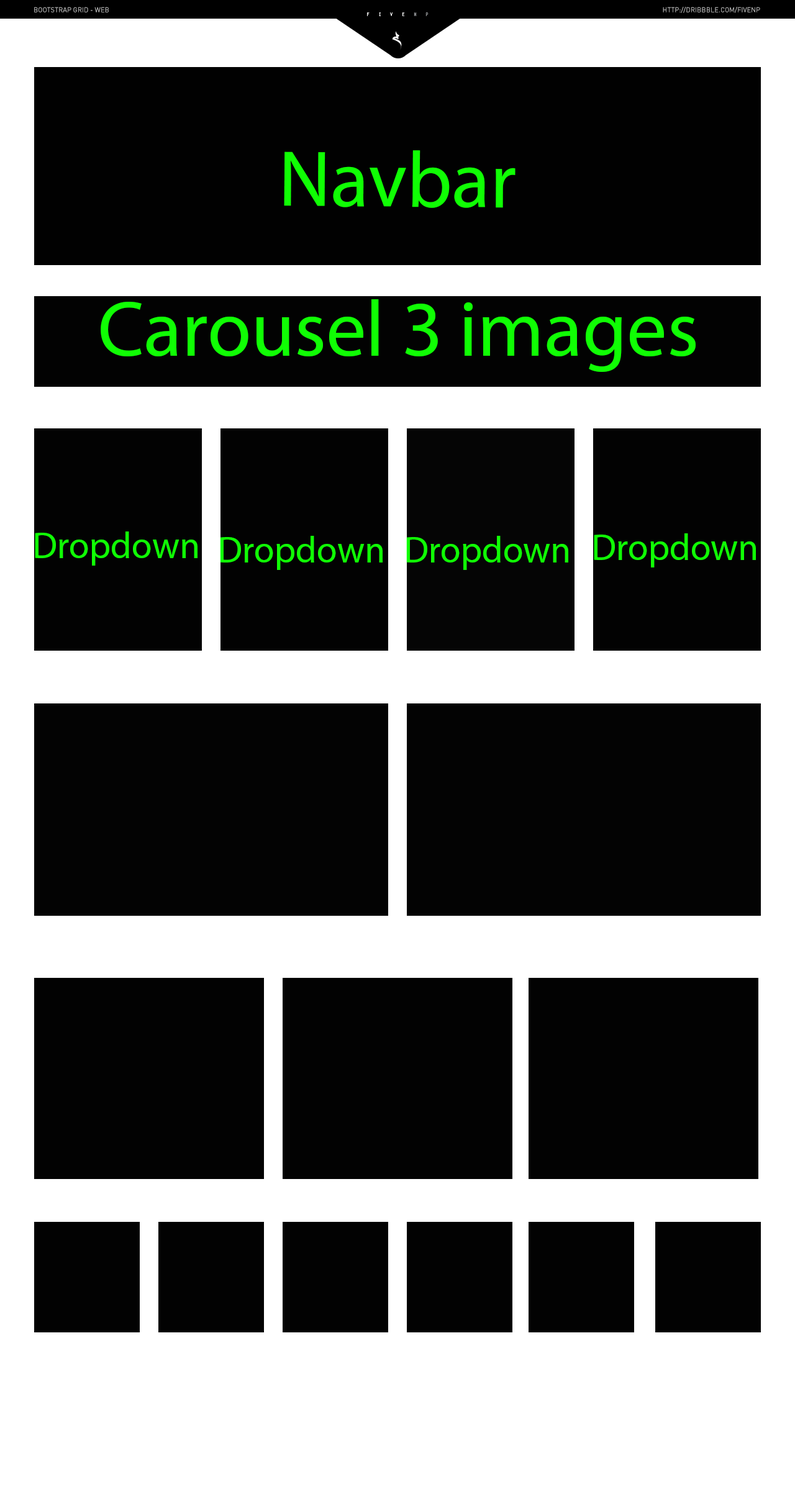
<style>
.page{position:relative;width:795px;height:1500px;background:#ffffff}
.page>*{position:absolute;margin:0}
.t1{font:79.5px "MyriadPro-Regular";color:#10fe04}
.t2{font:62.1px "MyriadPro-Regular";color:#10fe04}
.t3{font:37.3px "MyriadPro-Regular";color:#10fe04}
</style>
<div class="page">
<p class="t1" style="left:284px;top:150px;width:231px;height:58px"><span class="t2"><br></span>Navbar</p>
<p class="t1" style="left:101px;top:299px;width:594px;height:73px">Carousel 3 images</p>
<p class="t3" style="left:35px;top:532px;width:162px;height:34px">Dropdown</p>
<p class="t3" style="left:594px;top:533px;width:162px;height:35px">Dropdown</p>
<p class="t3" style="left:220px;top:536px;width:163px;height:34px">Dropdown</p>
<p class="t3" style="left:406px;top:536px;width:162px;height:34px">Dropdown</p>
</div>
